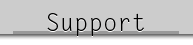
<style>
.page{position:relative;width:193px;height:45px;background:#cccccc}
.page>*{position:absolute;margin:0}
.t1{font:24px "LetterGothicStd"}
.t2{font:24px "LetterGothicStd";color:#000000}
</style>
<div class="page">
<p class="t1" style="left:47px;top:14px;width:97px;height:23px">Support</p>
<p class="t2" style="left:47px;top:13px;width:97px;height:23px">Support</p>
</div>
